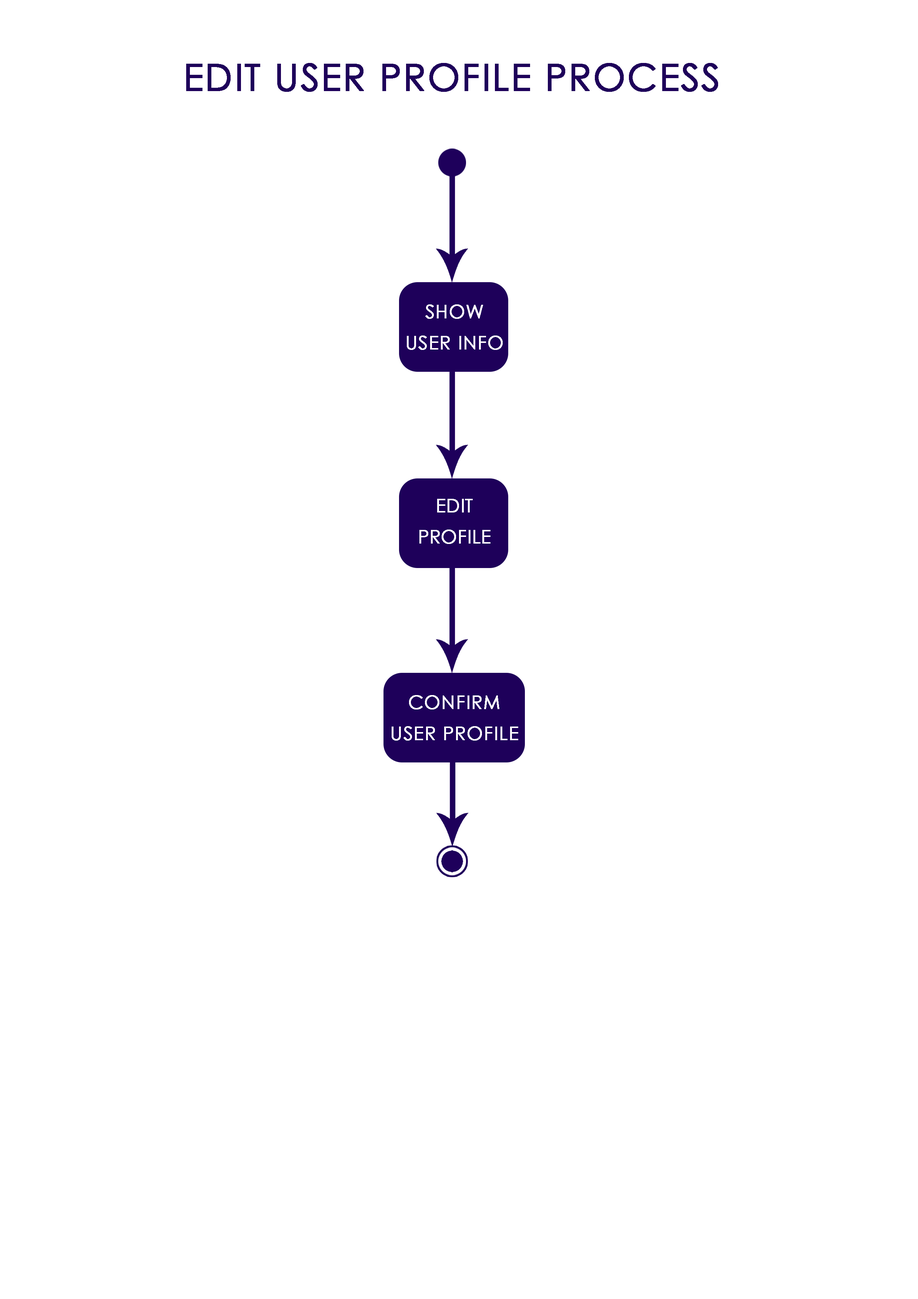
<style>
.page{position:relative;width:918px;height:1299px;background:#ffffff}
.page>*{position:absolute;margin:0}
.t1{font:37px "CenturyGothic";letter-spacing:0.025em;color:#1e005a;text-transform:uppercase;font-weight:bold}
.t2{font:18.5px/30.9px "CenturyGothic";letter-spacing:0.025em;color:#ffffff;text-transform:uppercase;font-weight:bold}
.t3{font:18.5px/30.9px "CenturyGothic";color:#ffffff;text-transform:uppercase;font-weight:bold}
</style>
<div class="page">
<p class="t1" style="left:186px;top:63px;width:532px;height:29px">edit user profile process</p>
<p class="t2" style="left:407px;top:304px;width:96px;height:46px;text-align:center">show user info</p>
<p class="t3" style="left:419px;top:499px;width:72px;height:45px;text-align:justify">edit<br>profile</p>
<p class="t2" style="left:392px;top:695px;width:126px;height:45px;text-align:center">confirm user profile</p>
</div>
